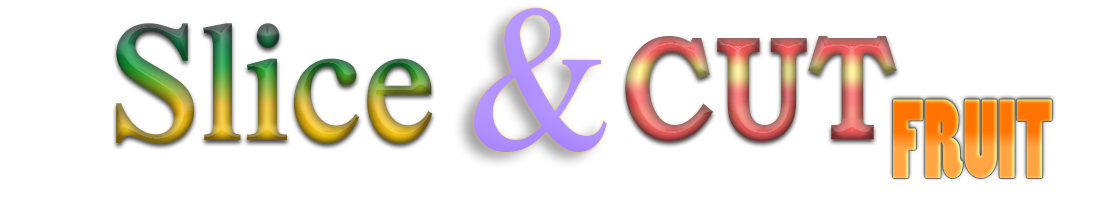
<style>
.page{position:relative;width:1100px;height:200px;background:#ffffff}
.page>*{position:absolute;margin:0}
.t1{font:209.2px "TimesNewRomanPSMT";color:#b192ff;scale:0.89 1}
.t2{font:173.1px "IskoolaPota-Bold";scale:0.91 1}
.t3{font:148.6px "BookmanOldStyle-Bold";scale:0.85 1}
.t4{font:103.8px "PoplarStd";scale:0.74 1}
</style>
<div class="page">
<p class="t1" style="left:473px;top:8px;width:134px;height:144px">&amp;</p>
<p class="t2" style="left:116px;top:23px;width:317px;height:121px">Slice</p>
<p class="t3" style="left:625px;top:36px;width:272px;height:105px">CUT</p>
<p class="t4" style="left:893px;top:99px;width:159px;height:79px">FRUIT</p>
</div>
